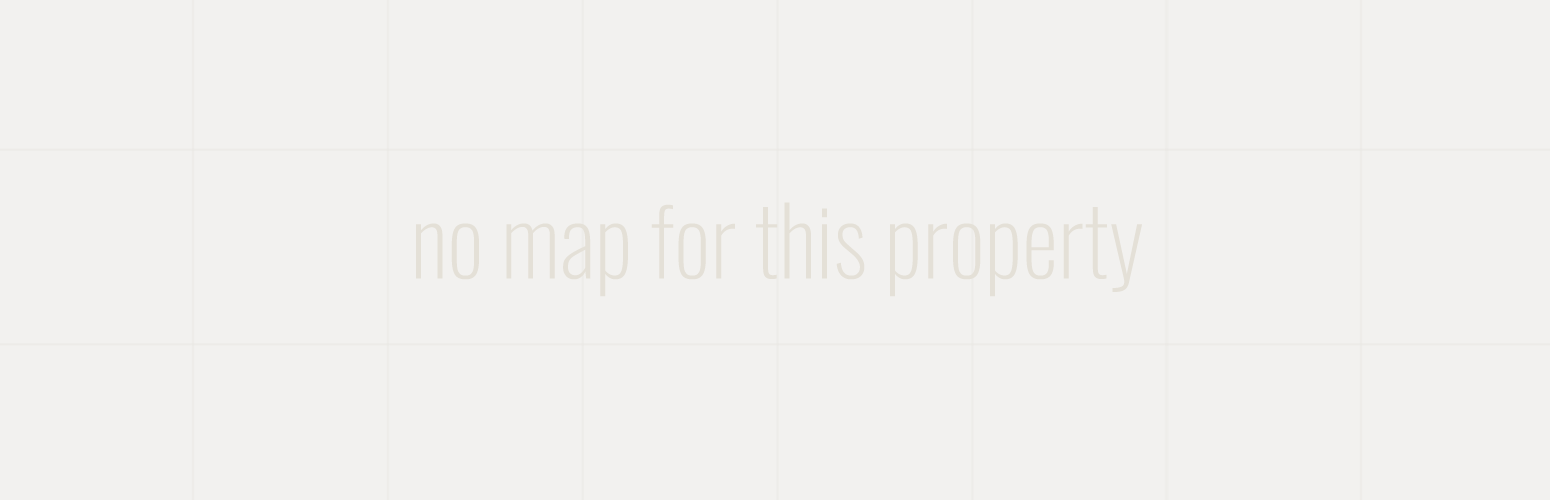
<style>
.page{position:relative;width:1550px;height:500px;background:#f2f1ef}
.page>*{position:absolute;margin:0}
.t1{font:93.7px "Oswald-ExtraLight";color:#e4e0d7}
</style>
<div class="page">
<p class="t1" style="left:416px;top:202px;width:726px;height:95px">no map for this property</p>
</div>
